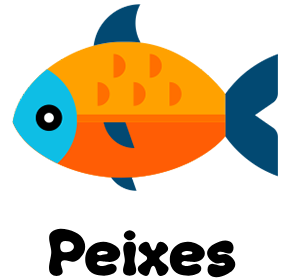
<style>
.page{position:relative;width:287px;height:278px;background:#ffffff}
.page>*{position:absolute;margin:0}
.t1{font:55.9px "Kush-Fat";color:#000000}
</style>
<div class="page">
<p class="t1" style="left:49px;top:228px;width:187px;height:50px">Peixes</p>
</div>
